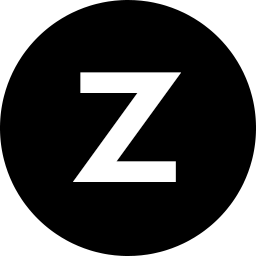
<style>
.page{position:relative;width:256px;height:256px;background:#000000}
.page>*{position:absolute;margin:0}
.t1{font:150px "Renogare-Regular";color:#ffffff}
</style>
<div class="page">
<p class="t1" style="left:73px;top:72px;width:108px;height:110px">Z</p>
</div>
